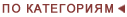
<style>
.page{position:relative;width:127px;height:17px;background:#ffffff}
.page>*{position:absolute;margin:0}
.t1{font:11.9px "ArialUnicodeMS";letter-spacing:0.06em;color:#883a37;font-weight:bold;scale:0.96 1}
</style>
<div class="page">
<p class="t1" style="left:2px;top:3px;width:111px;height:10px">ПО КАТЕГОРИЯМ</p>
</div>
